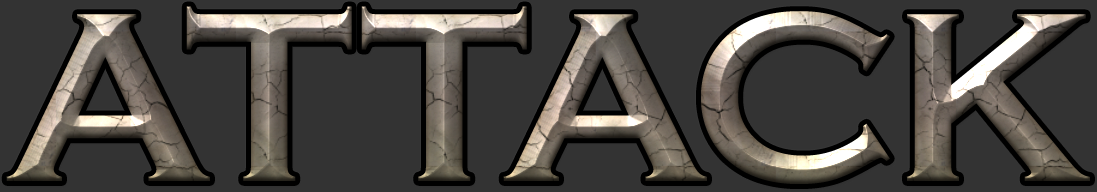
<style>
.page{position:relative;width:1097px;height:192px;background:#333333}
.page>*{position:absolute;margin:0}
.t1{font:250px "CopperplateGothic-Bold"}
</style>
<div class="page">
<p class="t1" style="left:6px;top:6px;width:1084px;height:178px">ATTACK</p>
</div>
